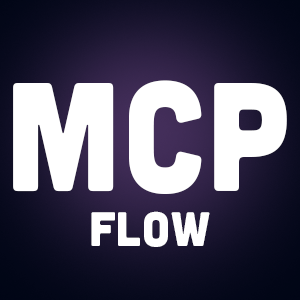
<style>
.page{position:relative;width:300px;height:300px;background:#ffffff}
.page>*{position:absolute;margin:0}
.t1{font:154.2px "Cubano-Regular";letter-spacing:0.02em;color:#ffffff;scale:0.94 1}
.t2{font:48.1px "Cubano-Regular";letter-spacing:0.02em;color:#ffffff}
</style>
<div class="page">
<p class="t1" style="left:13px;top:80px;width:274px;height:114px">mcp</p>
<p class="t2" style="left:91px;top:211px;width:119px;height:36px">flow</p>
</div>
